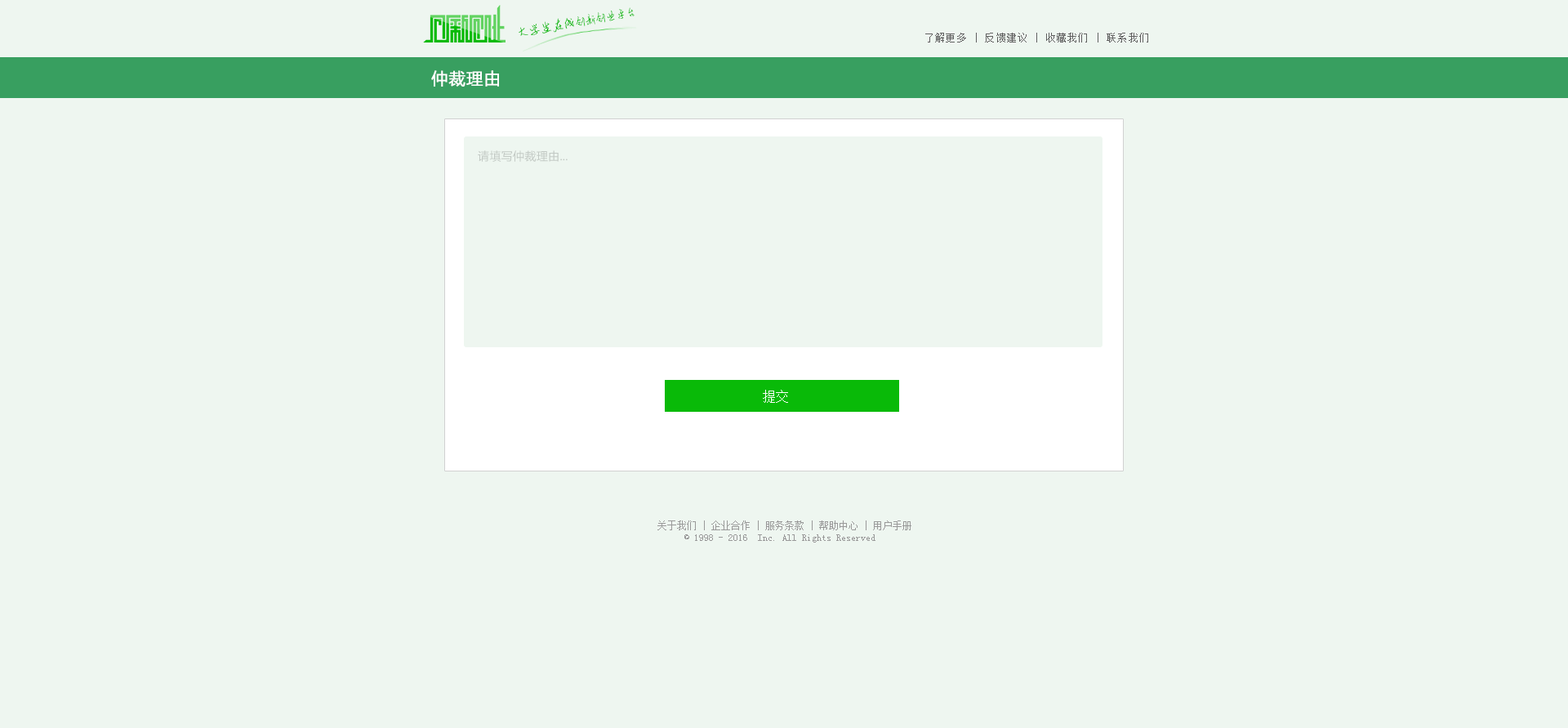
<style>
.page{position:relative;width:1568px;height:728px;background:#eef6f0}
.page>*{position:absolute;margin:0}
.t1{font:11.2px "AnJingCheng-Xing-2.0";letter-spacing:-0.01em;color:#09ba08}
.t2{font:12.6px "AnJingCheng-Xing-2.0";letter-spacing:-0.01em;color:#09ba08}
.t3{font:9.8px "SimSun";letter-spacing:0.1em;color:#606060}
.t4{font:16.3px "MicrosoftYaHei";letter-spacing:0.025em;color:#ffffff;font-weight:bold}
.t5{font:11.4px "MicrosoftYaHei";letter-spacing:0.025em;color:#c2c9c4}
.t6{font:13.1px "SimSun";color:#ffffff}
.t7{font:9.8px "SimSun";color:#999999}
</style>
<div class="page">
<p class="t1" style="left:519px;top:7px;width:116px;height:29px;rotate:-10deg"><span class="t2">大学生在线</span>创新创业平台</p>
<p class="t3" style="left:925px;top:33px;width:223px;height:9px">了解更多 | 反馈建议 | 收藏我们 | 联系我们</p>
<p class="t4" style="left:431px;top:70px;width:68px;height:17px">仲裁理由</p>
<p class="t5" style="left:478px;top:150px;width:90px;height:12px">请填写仲裁理由...</p>
<p class="t6" style="left:763px;top:390px;width:25px;height:13px">提交</p>
<p class="t7" style="left:657px;top:520px;width:254px;height:22px;text-align:center">关于我们 | 企业合作 | 服务条款 | 帮助中心 | 用户手册<br>© 1998 - 2016  Inc. All Rights Reserved</p>
</div>
